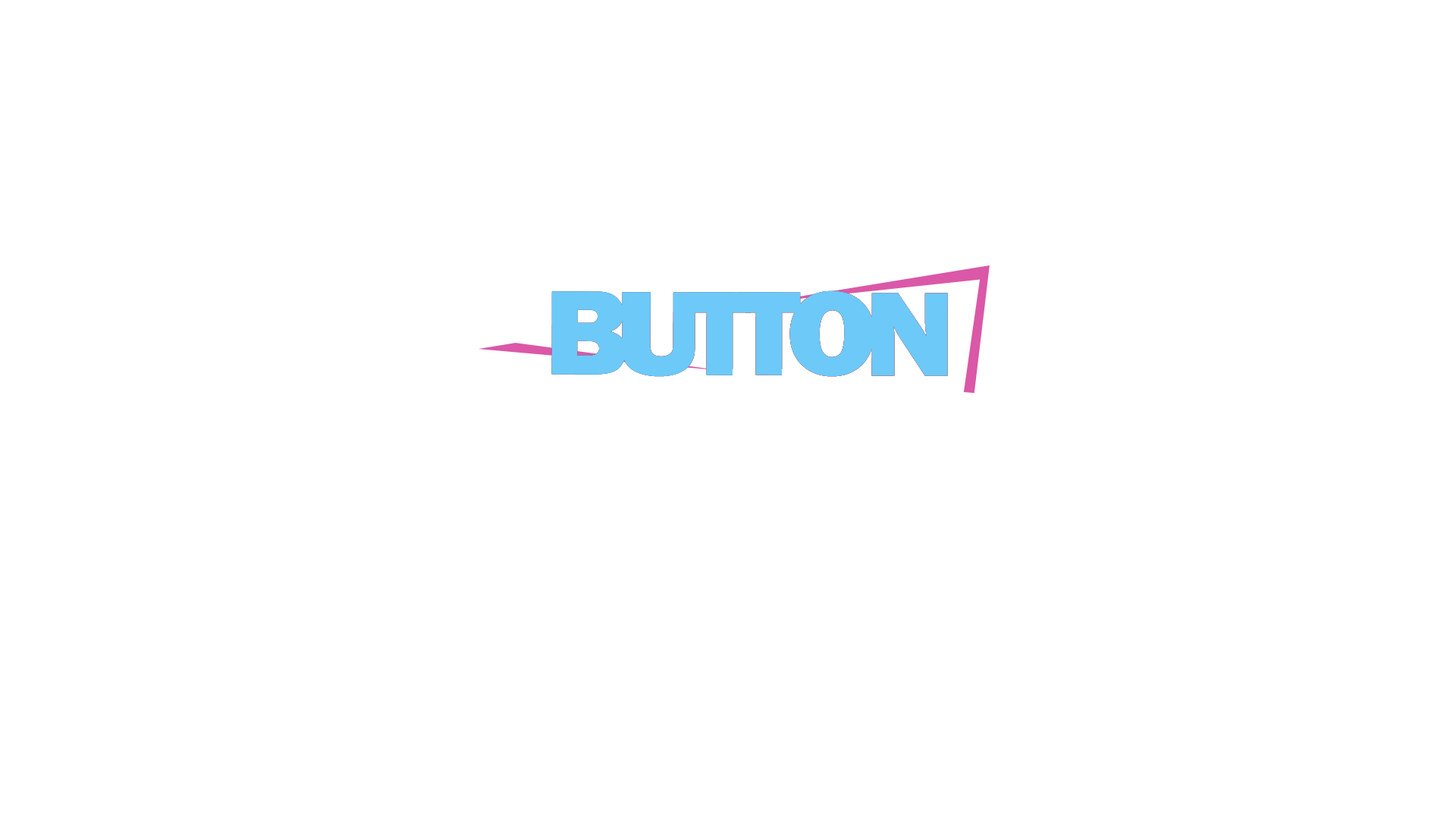
<style>
.page{position:relative;width:1456px;height:819px;background:#ffffff}
.page>*{position:absolute;margin:0}
.t1{font:123.2px "FranklinGothic-Heavy";letter-spacing:-0.125em;color:#6dc9f8;font-weight:bold;scale:1.07 1}
</style>
<div class="page">
<p class="t1" style="left:551px;top:290px;width:397px;height:87px">BUTTON</p>
<p class="t1" style="left:551px;top:290px;width:397px;height:87px">BUTTON</p>
<p class="t1" style="left:551px;top:290px;width:397px;height:87px">BUTTON</p>
</div>
